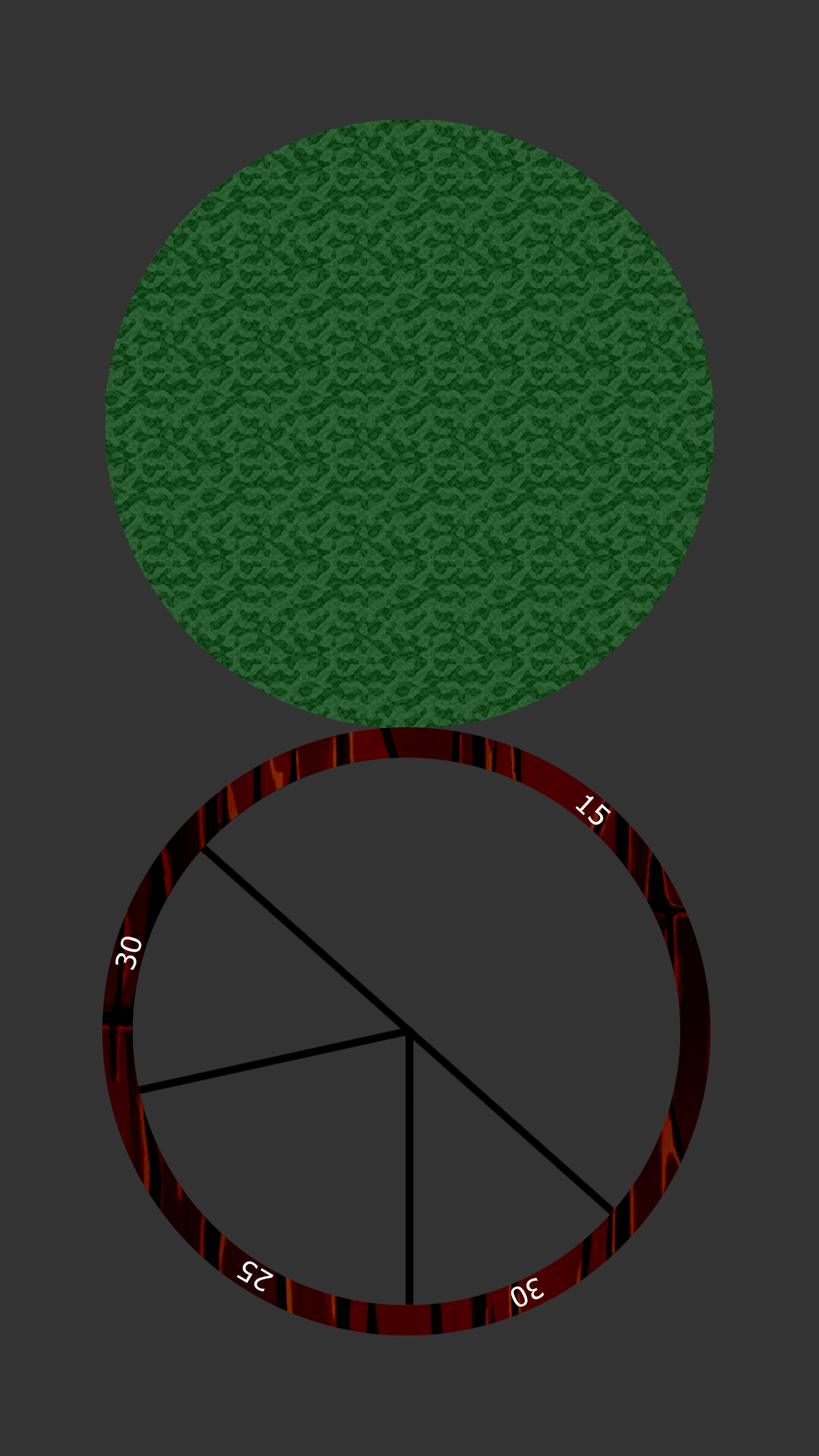
<style>
.page{position:relative;width:819px;height:1456px;background:#333333}
.page>*{position:absolute;margin:0}
.t1{font:27.3px "Verdana";color:#ffffff}
</style>
<div class="page">
<p class="t1" style="left:576px;top:795px;width:35px;height:30px;rotate:42deg">15</p>
<p class="t1" style="left:115px;top:937px;width:27px;height:33px;rotate:-73deg">30</p>
<p class="t1" style="left:237px;top:1261px;width:37px;height:30px;rotate:-149deg">25</p>
<p class="t1" style="left:511px;top:1278px;width:33px;height:29px;rotate:154deg">30</p>
</div>
